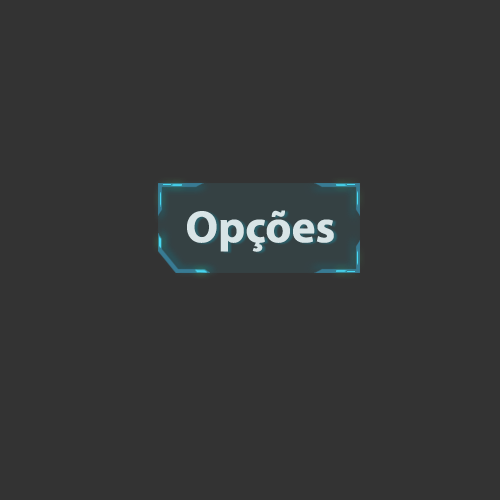
<style>
.page{position:relative;width:500px;height:500px;background:#333333}
.page>*{position:absolute;margin:0}
.t1{font:45.5px "MyriadPro-Bold";color:#d8e4e6}
</style>
<div class="page">
<p class="t1" style="left:187px;top:210px;width:147px;height:42px;text-align:center">Opções<br><br>e</p>
</div>
